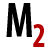
<style>
.page{position:relative;width:50px;height:50px;background:#ffffff}
.page>*{position:absolute;margin:0}
.t1{font:49.5px "MyriadPro-BoldCond";color:#000000;scale:0.91 1}
.t2{font:34.6px "MyriadPro-BoldCond";color:#b40202;scale:0.91 1}
</style>
<div class="page">
<p class="t1" style="left:6px;top:3px;width:26px;height:34px">M</p>
<p class="t2" style="left:33px;top:24px;width:12px;height:23px">2</p>
</div>
